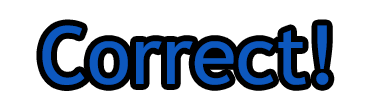
<style>
.page{position:relative;width:368px;height:93px;background:#ffffff}
.page>*{position:absolute;margin:0}
.t1{font:80px "TrebuchetMS";color:#0d58be}
</style>
<div class="page">
<p class="t1" style="left:42px;top:25px;width:287px;height:60px">Correct!</p>
</div>
